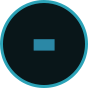
<style>
.page{position:relative;width:88px;height:88px;background:#091619}
.page>*{position:absolute;margin:0}
.t1{font:79.5px "Impact";color:#2b88a6}
</style>
<div class="page">
<p class="t1" style="left:33px;top:39px;width:22px;height:12px">-</p>
</div>
